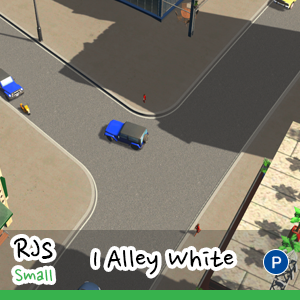
<style>
.page{position:relative;width:300px;height:300px}
.page>*{position:absolute;margin:0}
.t1{font:36.3px "NanumPen";color:#000000}
.t2{font:32px "NanumPen";color:#000000}
.t3{font:21.5px "NanumPen";color:#37b24d}
</style>
<div class="page">
<p class="t1" style="left:13px;top:238px;width:40px;height:21px">RJs</p>
<p class="t2" style="left:94px;top:250px;width:140px;height:25px">1 Alley White</p>
<p class="t3" style="left:15px;top:269px;width:38px;height:13px">Small</p>
</div>
